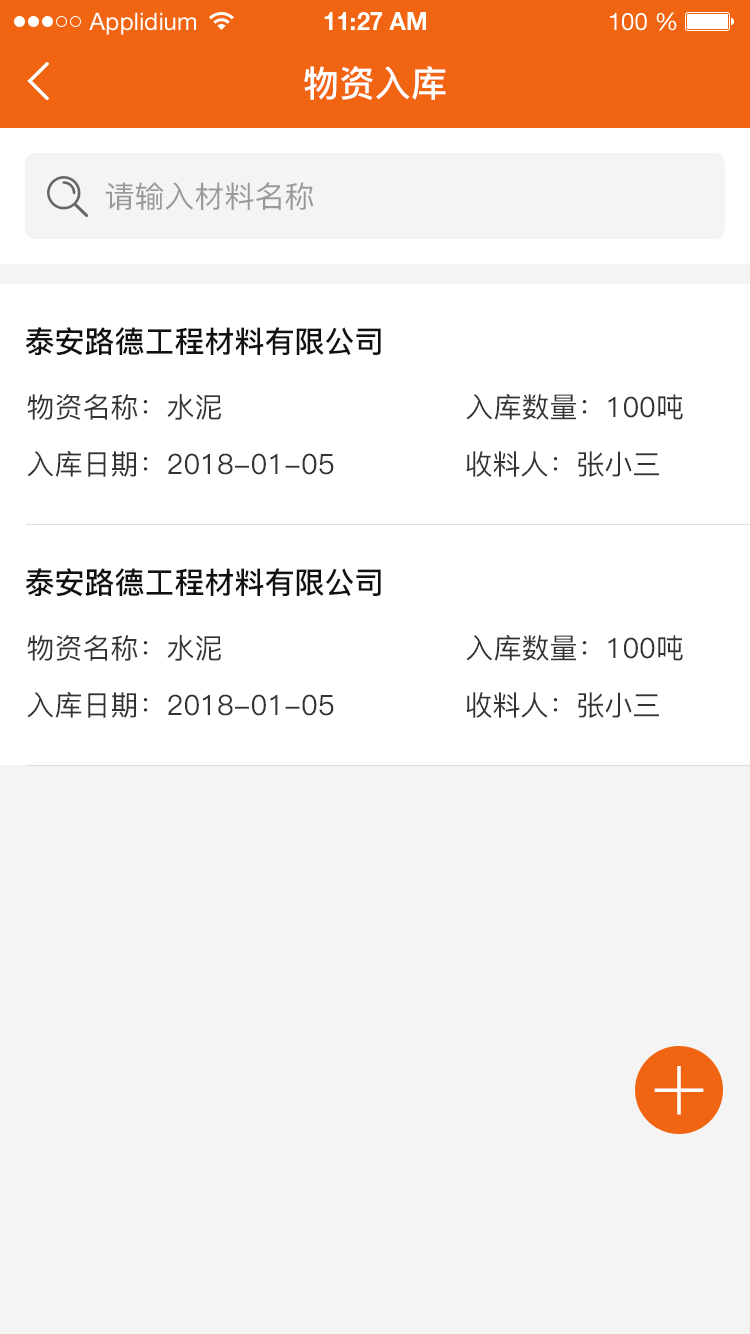
<style>
.page{position:relative;width:750px;height:1334px;background:#f4f4f4}
.page>*{position:absolute;margin:0}
.t1{font:36px "PingFang-SC-Bold";color:#ffffff}
.t2{font:30px "PingFang-SC-Medium";color:#999999}
.t3{font:30px "PingFang-SC-Bold";color:#111111}
.t4{font:28px "PingFang-SC-Medium";color:#333333}
.t5{font:95.9px "PingFang-SC-Light";color:#ffffff}
</style>
<div class="page">
<p class="t1" style="left:304px;top:66px;width:142px;height:34px">物资入库</p>
<p class="t2" style="left:105px;top:182px;width:209px;height:28px">请输入材料名称</p>
<p class="t3" style="left:25px;top:327px;width:356px;height:29px">泰安路德工程材料有限公司</p>
<p class="t4" style="left:27px;top:394px;width:194px;height:26px">物资名称：水泥</p>
<p class="t4" style="left:466px;top:394px;width:217px;height:26px">入库数量：100吨</p>
<p class="t4" style="left:27px;top:451px;width:307px;height:26px">入库日期：2018-01-05</p>
<p class="t4" style="left:466px;top:451px;width:193px;height:26px">收料人：张小三</p>
<p class="t3" style="left:25px;top:568px;width:356px;height:29px">泰安路德工程材料有限公司</p>
<p class="t4" style="left:27px;top:635px;width:194px;height:26px">物资名称：水泥</p>
<p class="t4" style="left:466px;top:635px;width:217px;height:26px">入库数量：100吨</p>
<p class="t4" style="left:27px;top:692px;width:307px;height:26px">入库日期：2018-01-05</p>
<p class="t4" style="left:466px;top:692px;width:193px;height:26px">收料人：张小三</p>
<p class="t5" style="left:654px;top:1066px;width:50px;height:49px">+</p>
</div>
